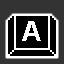
<style>
.page{position:relative;width:64px;height:64px;background:#333333}
.page>*{position:absolute;margin:0}
.t1{font:28px "Arial-BoldMT";color:#ffffff}
</style>
<div class="page">
<p class="t1" style="left:22px;top:21px;width:19px;height:20px">A</p>
</div>
